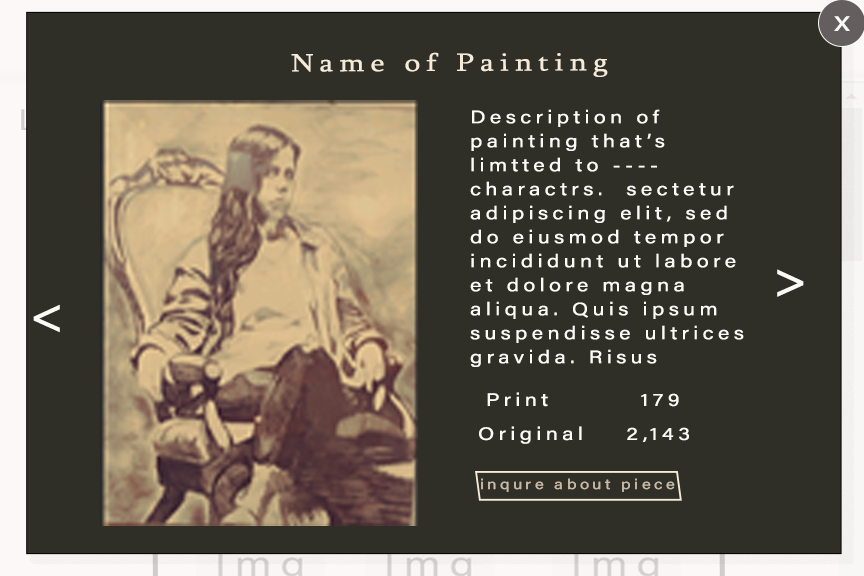
<style>
.page{position:relative;width:864px;height:576px;background:#2f2f27}
.page>*{position:absolute;margin:0}
.t1{font:28.4px "AcuminConcept-Regular";letter-spacing:0.2em;color:#fbfbf7;scale:1.2 1}
.t2{font:25.6px "Sylfaen";letter-spacing:0.2em;color:#f6ead9;scale:1.2 1}
.t3{font:18px/24px "AcuminConcept-Regular";letter-spacing:0.2em;color:#fbfbf7;scale:1.2 1}
.t4{font:48px "AcuminConcept-Regular";letter-spacing:0.2em;color:#fbfbf7;scale:1.2 1}
.t5{font:18px "AcuminConcept-Regular";letter-spacing:0.2em;color:#fbfbf7;scale:1.2 1}
.t6{font:14px "AcuminConcept-Regular";letter-spacing:0.2em;color:#c8baa5;scale:1.2 1}
</style>
<div class="page">
<p class="t1" style="left:834px;top:16px;width:16px;height:15px">x</p>
<p class="t2" style="left:291px;top:52px;width:317px;height:25px">Name of Painting</p>
<p class="t3" style="left:470px;top:109px;width:274px;height:258px">Description of painting that’s limtted to ---- charactrs.  sectetur adipiscing elit, sed do eiusmod tempor incididunt ut labore et dolore magna aliqua. Quis ipsum suspendisse ultrices gravida. Risus commodo viverra maecenas accumsan</p>
<p class="t4" style="left:777px;top:269px;width:27px;height:28px">&gt;</p>
<p class="t4" style="left:33px;top:304px;width:27px;height:29px;rotate:180deg">&gt;</p>
<p class="t5" style="left:487px;top:392px;width:192px;height:15px">Print         179</p>
<p class="t5" style="left:479px;top:426px;width:210px;height:18px">Original    2,143</p>
<p class="t6" style="left:481px;top:478px;width:194px;height:14px">inqure about piece</p>
</div>
